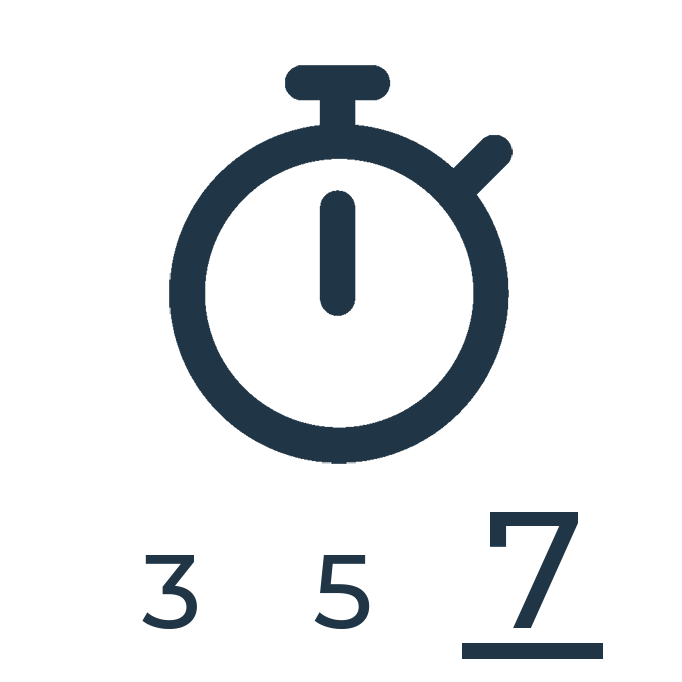
<style>
.page{position:relative;width:682px;height:682px;background:#ffffff}
.page>*{position:absolute;margin:0}
.t1{font:104.2px "Montserrat-Medium";color:#203545}
.t2{font:166.7px "Montserrat-Medium";color:#203545}
</style>
<div class="page">
<p class="t1" style="left:142px;top:512px;width:436px;height:117px">3     5     <span class="t2">7</span></p>
</div>
